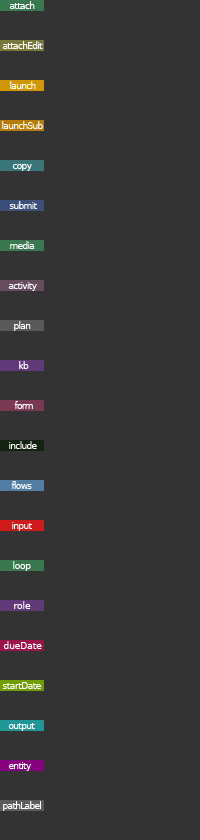
<style>
.page{position:relative;width:200px;height:840px;background:#333333}
.page>*{position:absolute;margin:0}
.t1{font:9px "BitstreamVeraSans-Roman";letter-spacing:-0.075em;color:#ffffff}
.t2{font:9px "BitstreamVeraSans-Roman";letter-spacing:-0.025em;color:#ffffff}
.t3{font:9px "BitstreamVeraSans-Roman";letter-spacing:-0.005em;color:#ffffff}
.t4{font:9px "BitstreamVeraSans-Roman";letter-spacing:-0.05em;color:#ffffff}
</style>
<div class="page">
<p class="t1" style="left:9px;top:1px;width:26px;height:8px">attach</p>
<p class="t1" style="left:2px;top:41px;width:41px;height:8px">attachEdit</p>
<p class="t1" style="left:10px;top:81px;width:26px;height:8px">launch</p>
<p class="t1" style="left:2px;top:121px;width:41px;height:8px">launchSub</p>
<p class="t1" style="left:12px;top:164px;width:20px;height:7px">copy</p>
<p class="t1" style="left:9px;top:201px;width:28px;height:8px">submit</p>
<p class="t1" style="left:10px;top:241px;width:25px;height:8px">media</p>
<p class="t1" style="left:8px;top:282px;width:29px;height:9px">activity</p>
<p class="t1" style="left:14px;top:321px;width:17px;height:10px">plan</p>
<p class="t1" style="left:19px;top:361px;width:10px;height:8px">kb</p>
<p class="t1" style="left:14px;top:401px;width:19px;height:8px">form</p>
<p class="t1" style="left:9px;top:441px;width:28px;height:8px">include</p>
<p class="t1" style="left:11px;top:481px;width:21px;height:8px">flows</p>
<p class="t1" style="left:12px;top:522px;width:20px;height:9px">input</p>
<p class="t2" style="left:13px;top:561px;width:18px;height:10px">loop</p>
<p class="t3" style="left:14px;top:601px;width:17px;height:8px">role</p>
<p class="t3" style="left:3px;top:641px;width:39px;height:8px">dueDate</p>
<p class="t4" style="left:2px;top:682px;width:39px;height:7px">startDate</p>
<p class="t1" style="left:8px;top:723px;width:27px;height:8px">output</p>
<p class="t1" style="left:8px;top:762px;width:24px;height:9px">entity</p>
<p class="t1" style="left:3px;top:801px;width:38px;height:10px">pathLabel</p>
</div>
